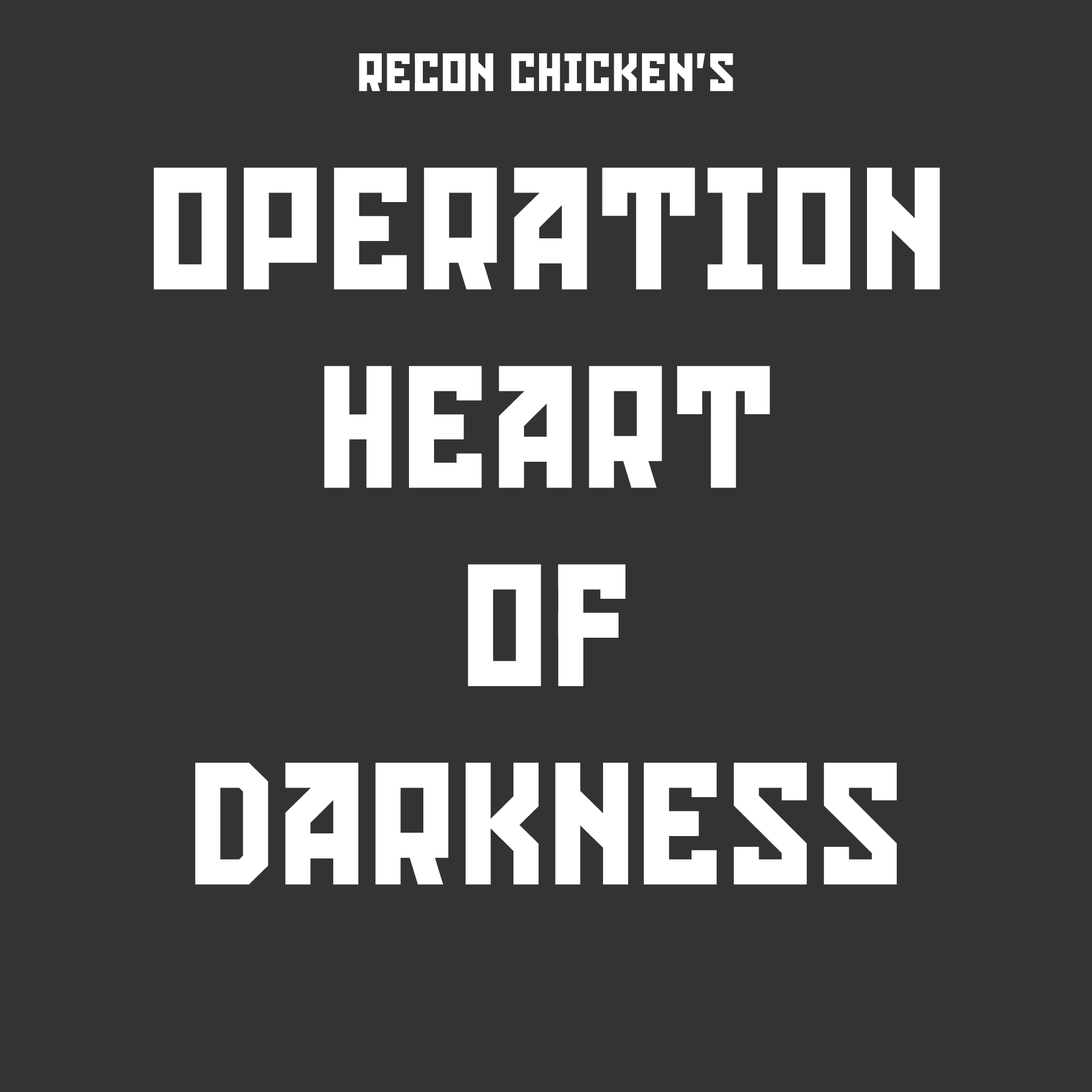
<style>
.page{position:relative;width:1092px;height:1092px;background:#333333}
.page>*{position:absolute;margin:0}
.t1{font:165.3px "KonstruktorRegular";color:#ffffff;text-transform:uppercase}
.t2{font:51.2px "KonstruktorRegular";color:#ffffff;text-transform:uppercase}
</style>
<div class="page">
<p class="t1" style="left:154px;top:53px;width:786px;height:832px;text-align:center"><span class="t2">recon chicken’s<br></span>Operation <br>heart<br>of<br>darkness</p>
</div>
